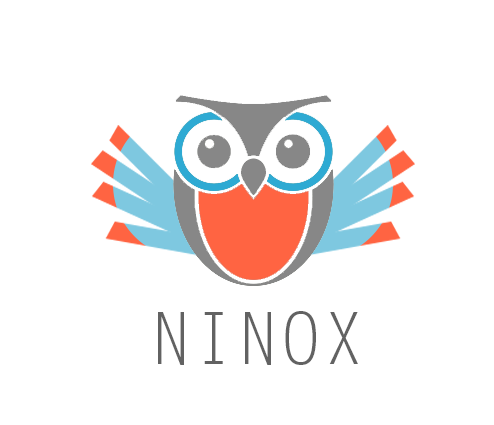
<style>
.page{position:relative;width:494px;height:425px;background:#ffffff}
.page>*{position:absolute;margin:0}
.t1{font:72px "LetterGothicStd";color:#626262}
</style>
<div class="page">
<p class="t1" style="left:158px;top:311px;width:200px;height:54px">NINOX</p>
</div>
